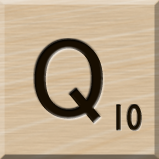
<style>
.page{position:relative;width:159px;height:159px}
.page>*{position:absolute;margin:0}
.t1{font:116px "MS-UIGothic";color:#180e01}
.t2{font:36px "GillSansMT";color:#1c1101;font-weight:bold;scale:0.84 1}
</style>
<div class="page">
<p class="t1" style="left:34px;top:39px;width:69px;height:85px">Q</p>
<p class="t2" style="left:116px;top:104px;width:26px;height:27px">10</p>
</div>
